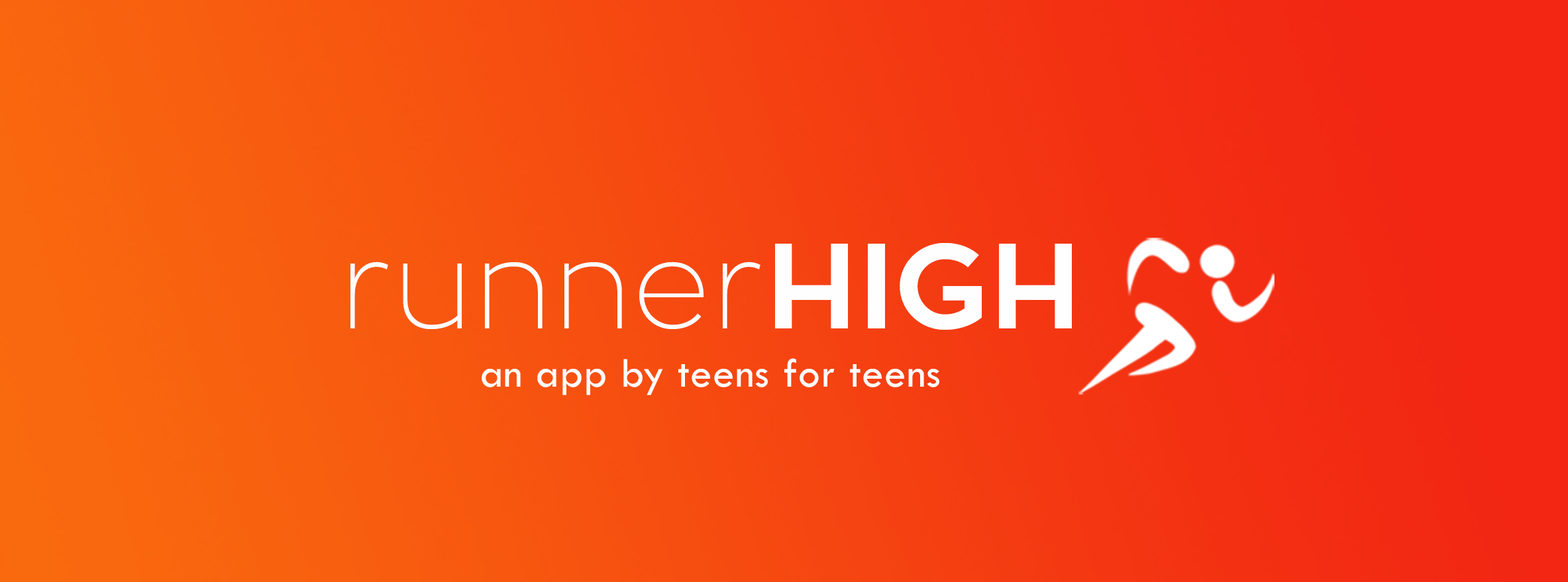
<style>
.page{position:relative;width:1568px;height:582px}
.page>*{position:absolute;margin:0}
.t1{font:120.1px "ZonaPro-Thin";letter-spacing:0.02em;color:#fefefe}
.t2{font:120.1px "ZonaPro-Bold";letter-spacing:0.02em;color:#fefefe}
.t3{font:43.4px "TwCenMT-Regular";letter-spacing:0.02em;color:#fefefe}
</style>
<div class="page">
<p class="t1" style="left:350px;top:243px;width:722px;height:87px">runner<span class="t2">HIGH</span></p>
<p class="t3" style="left:482px;top:358px;width:457px;height:37px">an app by teens for teens</p>
</div>
